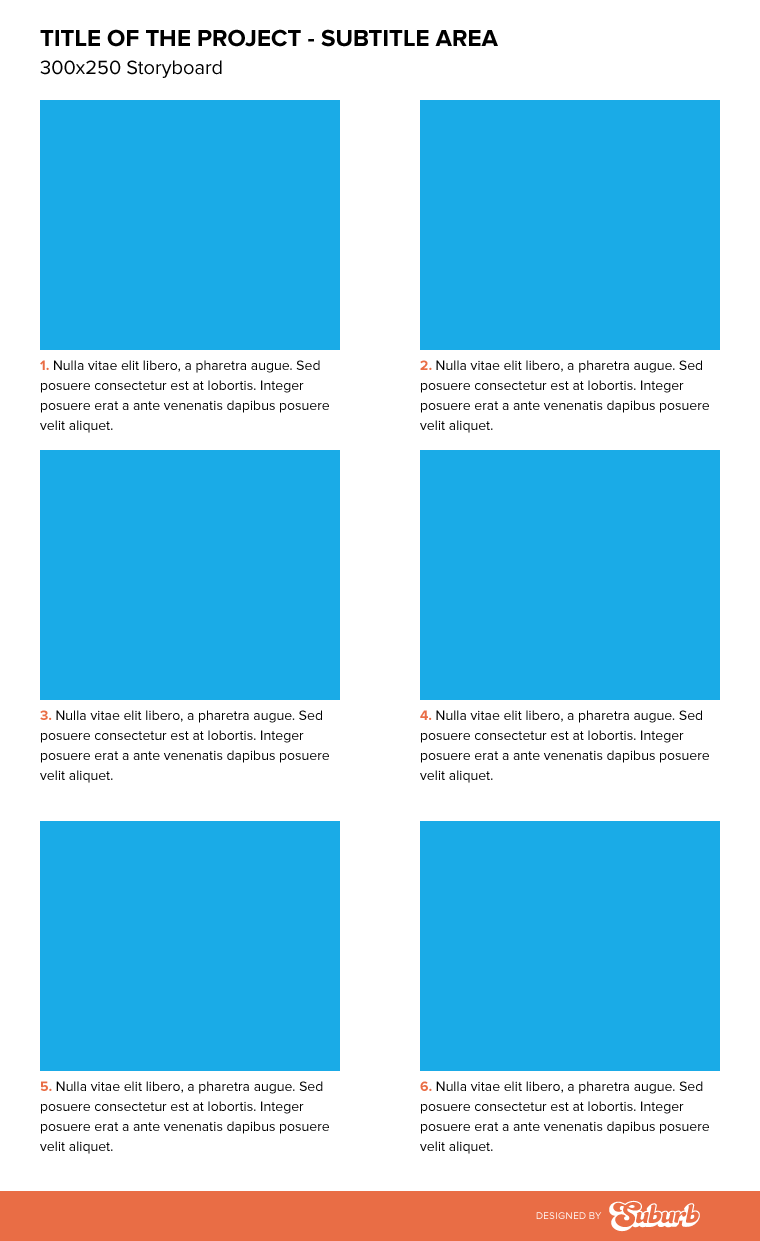
<style>
.page{position:relative;width:760px;height:1241px;background:#1aabe7}
.page>*{position:absolute;margin:0}
.t1{font:24px/28px "ProximaNova-Bold";color:#000000}
.t2{font:20px/28px "ProximaNova-Regular";color:#000000}
.t3{font:14px/20px "ProximaNova-Regular";color:#000000}
.t4{font:14px/20px "ProximaNova-Bold";color:#e96d45}
.t5{font:10px "ProximaNova-Regular";letter-spacing:0.04em}
.t6{font:10px "ProximaNova-Regular";letter-spacing:0.02em}
.t7{font:10px "ProximaNova-Regular"}
.t8{font:10px "ProximaNova-Regular";letter-spacing:0.06em}
</style>
<div class="page">
<p class="t1" style="left:40px;top:29px;width:458px;height:49px">TITLE OF THE PROJECT - SUBTITLE AREA<br><span class="t2">300x250 Storyboard</span></p>
<p class="t3" style="left:40px;top:360px;width:289px;height:73px"><span class="t4">1. </span>Nulla vitae elit libero, a pharetra augue. Sed posuere consectetur est at lobortis. Integer posuere erat a ante venenatis dapibus posuere velit aliquet.</p>
<p class="t3" style="left:420px;top:360px;width:289px;height:73px"><span class="t4">2.</span> Nulla vitae elit libero, a pharetra augue. Sed posuere consectetur est at lobortis. Integer posuere erat a ante venenatis dapibus posuere velit aliquet.</p>
<p class="t3" style="left:40px;top:710px;width:289px;height:73px"><span class="t4">3.</span> Nulla vitae elit libero, a pharetra augue. Sed posuere consectetur est at lobortis. Integer posuere erat a ante venenatis dapibus posuere velit aliquet.</p>
<p class="t3" style="left:420px;top:710px;width:289px;height:73px"><span class="t4">4. </span>Nulla vitae elit libero, a pharetra augue. Sed posuere consectetur est at lobortis. Integer posuere erat a ante venenatis dapibus posuere velit aliquet.</p>
<p class="t3" style="left:40px;top:1081px;width:289px;height:73px"><span class="t4">5.</span> Nulla vitae elit libero, a pharetra augue. Sed posuere consectetur est at lobortis. Integer posuere erat a ante venenatis dapibus posuere velit aliquet.</p>
<p class="t3" style="left:420px;top:1081px;width:289px;height:73px"><span class="t4">6.</span> Nulla vitae elit libero, a pharetra augue. Sed posuere consectetur est at lobortis. Integer posuere erat a ante venenatis dapibus posuere velit aliquet.</p>
<p class="t5" style="left:536px;top:1212px;width:66px;height:7px"><span class="t6">D</span><span class="t7">E</span>SIG<span class="t8">N</span><span class="t6">E</span><span class="t7">D </span>B<span class="t7">Y</span></p>
</div>
